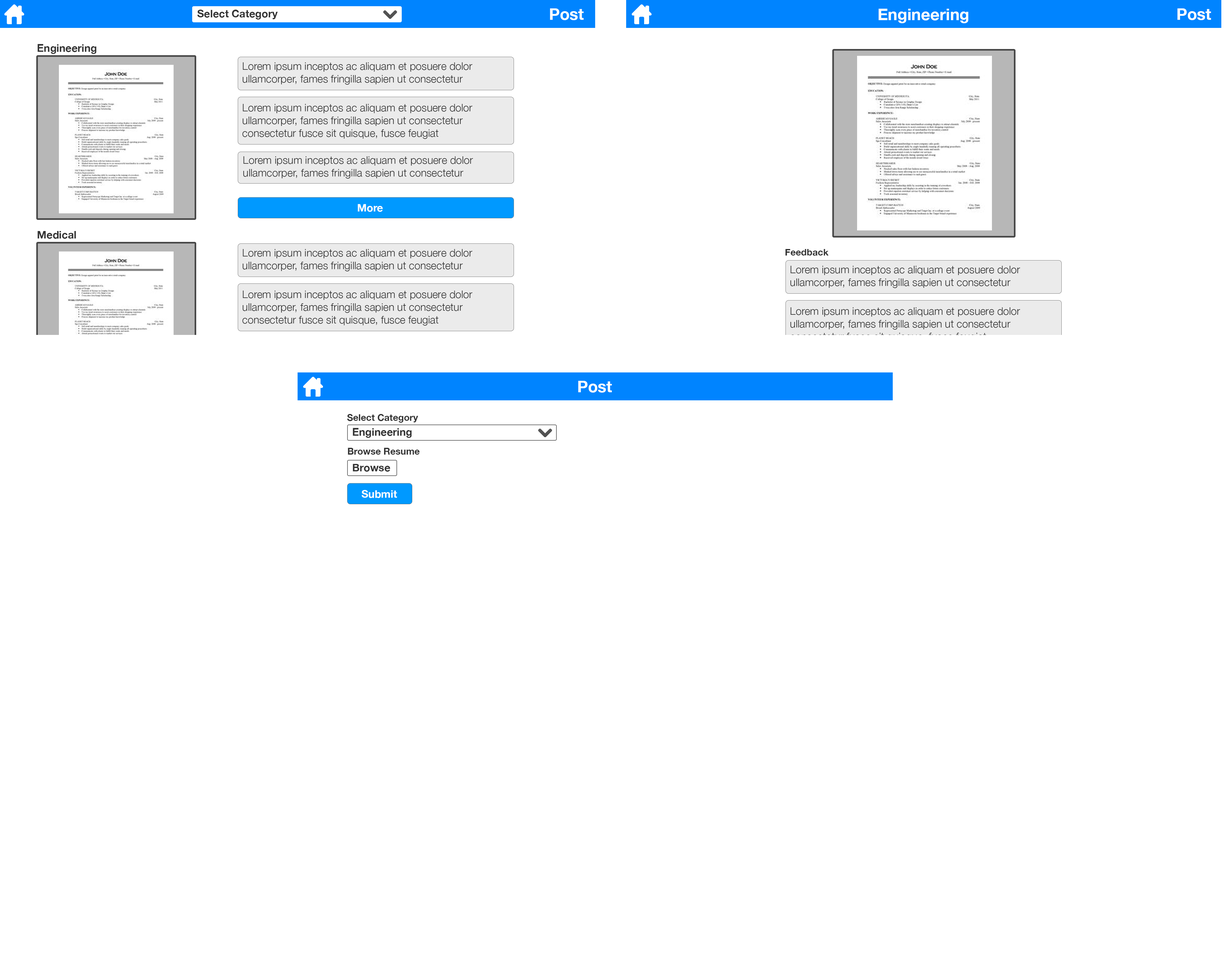
<style>
.page{position:relative;width:1230px;height:970px;background:#ffffff}
.page>*{position:absolute;margin:0}
.t1{font:10.5px "HelveticaNeue-Bold";color:#333333}
.t2{font:16.1px "HelveticaNeue-Bold";color:#ffffff}
.t3{font:10.5px "HelveticaNeue-Light";color:#333333}
.t4{font:10.5px "HelveticaNeue-Bold";color:#ffffff}
.t5{font:9.3px "HelveticaNeue-Bold";color:#333333}
</style>
<div class="page">
<p class="t1" style="left:197px;top:10px;width:81px;height:10px">Select Category</p>
<p class="t2" style="left:550px;top:8px;width:34px;height:12px">Post</p>
<p class="t2" style="left:878px;top:9px;width:90px;height:14px">Engineering</p>
<p class="t2" style="left:1177px;top:8px;width:34px;height:12px">Post</p>
<p class="t1" style="left:38px;top:44px;width:58px;height:10px">Engineering</p>
<p class="t3" style="left:242px;top:62px;width:230px;height:23px">Lorem ipsum inceptos ac aliquam et posuere dolor <br>ullamcorper, fames fringilla sapien ut consectetur</p>
<p class="t3" style="left:242px;top:104px;width:230px;height:35px">Lorem ipsum inceptos ac aliquam et posuere dolor <br>ullamcorper, fames fringilla sapien ut consectetur <br>consectetur fusce sit quisque, fusce feugiat</p>
<p class="t3" style="left:243px;top:156px;width:230px;height:23px">Lorem ipsum inceptos ac aliquam et posuere dolor <br>ullamcorper, fames fringilla sapien ut consectetur</p>
<p class="t4" style="left:358px;top:204px;width:25px;height:8px">More</p>
<p class="t1" style="left:38px;top:231px;width:38px;height:8px">Medical</p>
<p class="t3" style="left:242px;top:249px;width:230px;height:22px">Lorem ipsum inceptos ac aliquam et posuere dolor <br>ullamcorper, fames fringilla sapien ut consectetur</p>
<p class="t5" style="left:785px;top:249px;width:44px;height:7px">Feedback</p>
<p class="t3" style="left:790px;top:266px;width:230px;height:22px">Lorem ipsum inceptos ac aliquam et posuere dolor <br>ullamcorper, fames fringilla sapien ut consectetur</p>
<p class="t3" style="left:242px;top:290px;width:230px;height:35px">Lorem ipsum inceptos ac aliquam et posuere dolor <br>ullamcorper, fames fringilla sapien ut consectetur <br>consectetur fusce sit quisque, fusce feugiat</p>
<p class="t3" style="left:790px;top:307px;width:230px;height:35px">Lorem ipsum inceptos ac aliquam et posuere dolor <br>ullamcorper, fames fringilla sapien ut consectetur <br>consectetur fusce sit quisque, fusce feugiat</p>
<p class="t2" style="left:578px;top:381px;width:34px;height:11px">Post</p>
<p class="t5" style="left:347px;top:414px;width:71px;height:8px">Select Category</p>
<p class="t1" style="left:353px;top:428px;width:59px;height:10px">Engineering</p>
<p class="t5" style="left:348px;top:448px;width:72px;height:6px">Browse Resume</p>
<p class="t1" style="left:353px;top:464px;width:37px;height:7px">Browse</p>
<p class="t4" style="left:361px;top:490px;width:36px;height:8px">Submit</p>
</div>
